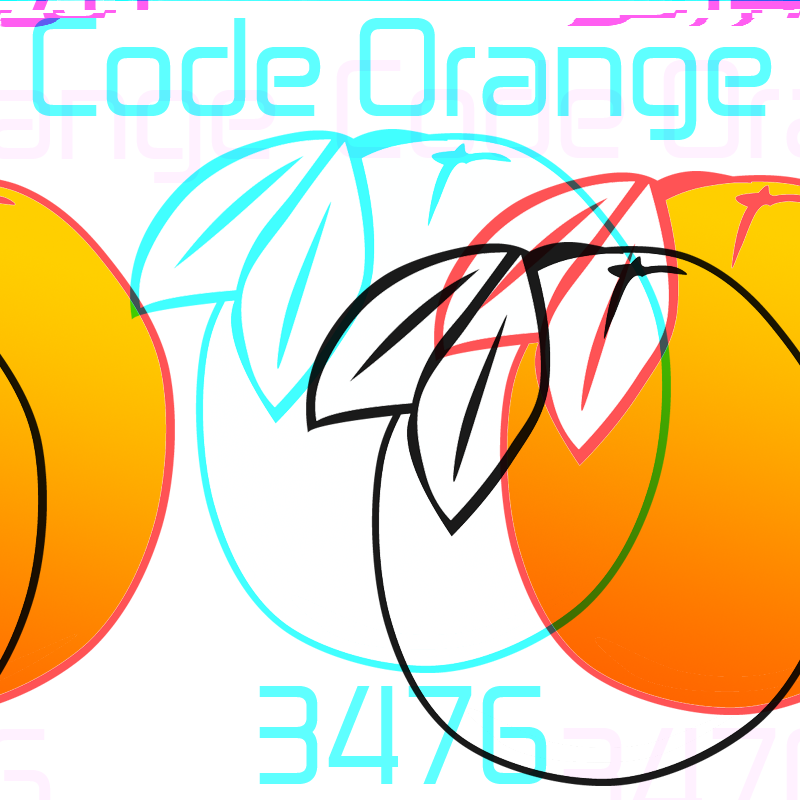
<style>
.page{position:relative;width:800px;height:800px;background:#ffffff}
.page>*{position:absolute;margin:0}
.t1{font:117px "Zekton";color:#5ef1ff}
</style>
<div class="page">
<p class="t1" style="left:32px;top:17px;width:740px;height:122px">Code Orange</p>
<p class="t1" style="left:259px;top:685px;width:288px;height:98px">3476</p>
</div>
